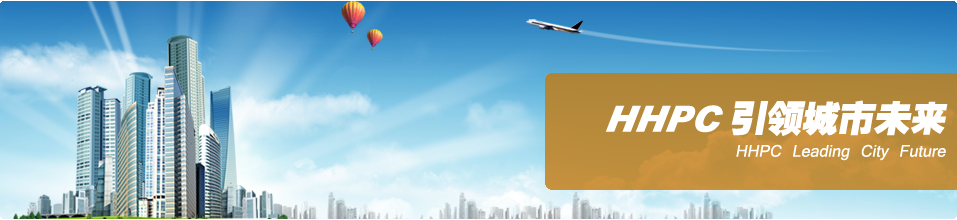
<style>
.page{position:relative;width:957px;height:220px}
.page>*{position:absolute;margin:0}
.t1{font:36px "FZCCHJW--GB1-0";color:#ffffff;font-style:italic}
.t2{font:36px "Arial-BlackItalic";color:#ffffff;font-style:italic}
.t3{font:18px "Vrinda";color:#ffffff;font-style:italic}
</style>
<div class="page">
<p class="t1" style="left:731px;top:100px;width:217px;height:36px">引领城市未来</p>
<p class="t2" style="left:606px;top:105px;width:117px;height:28px">HHPC</p>
<p class="t3" style="left:736px;top:144px;width:210px;height:17px">HHPC Leading City Future</p>
</div>
